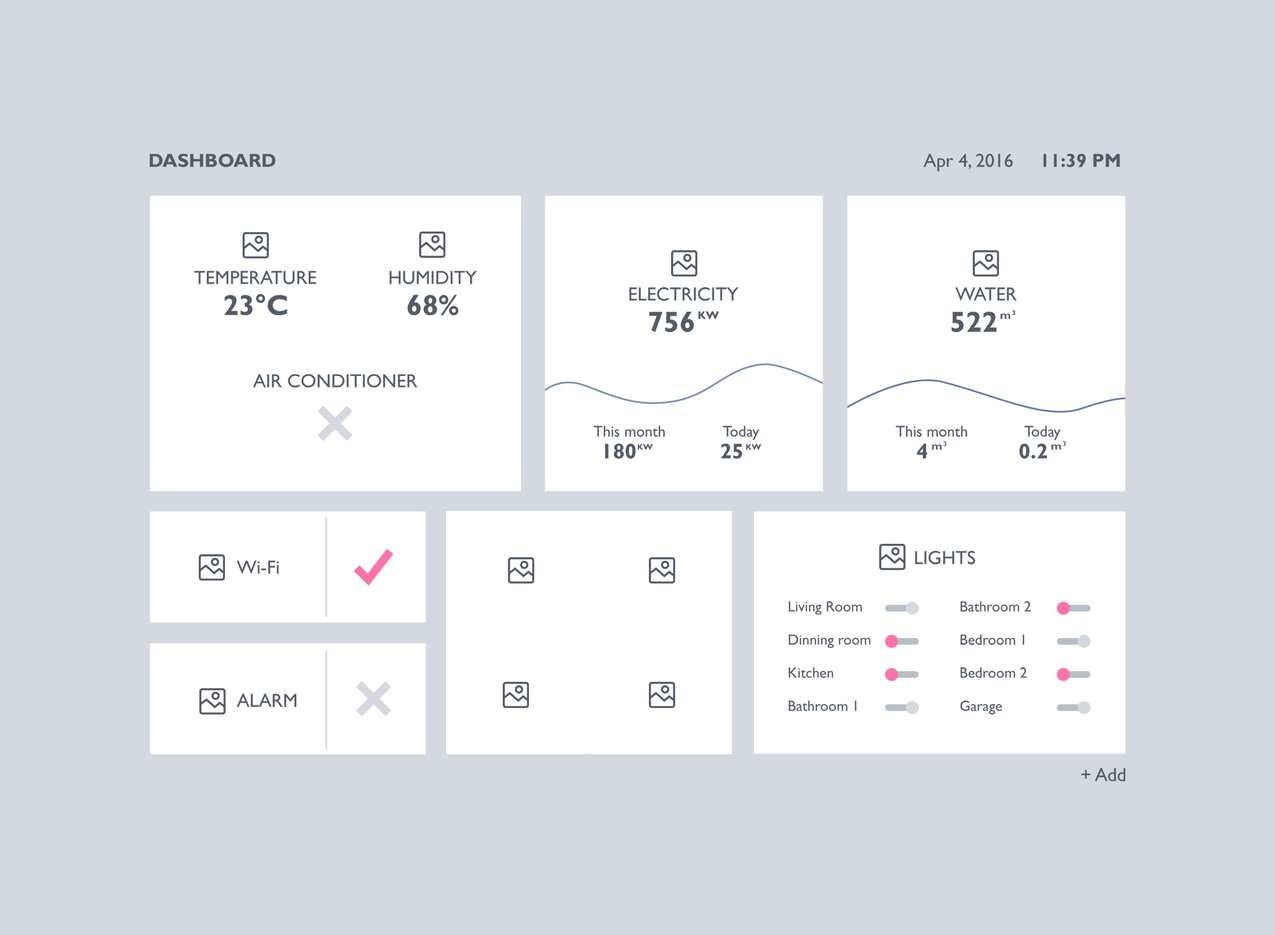
<style>
.page{position:relative;width:1275px;height:935px;background:#d3d9de}
.page>*{position:absolute;margin:0}
.t1{font:19px "GillSansMT-Bold";color:#525c66;text-transform:uppercase}
.t2{font:19px "GillSansMT";color:#525c66}
.t3{font:19px "GillSansMT-Bold";color:#525c66}
.t4{font:19px "GillSansMT";color:#525c66;text-transform:uppercase}
.t5{font:29px "GillSansMT-Bold";color:#525c66;text-transform:uppercase}
.t6{font:11px "GillSansMT-Bold";color:#525c66;text-transform:uppercase}
.t7{font:11px "GillSansMT-Bold";color:#525c66}
.t8{font:6.5px "GillSansMT-Bold";color:#525c66;text-transform:uppercase;scale:1.05 1}
.t9{font:15.6px "GillSansMT";color:#525c66}
.t10{font:21.2px "GillSansMT-Bold";color:#525c66;text-transform:uppercase}
.t11{font:8.2px "GillSansMT-Bold";color:#525c66;text-transform:uppercase}
.t12{font:14.7px "GillSansMT";color:#525c66}
</style>
<div class="page">
<p class="t1" style="left:150px;top:154px;width:125px;height:13px">dashboard</p>
<p class="t2" style="left:923px;top:154px;width:197px;height:17px">Apr 4, 2016     <span class="t3">11:39 PM</span></p>
<p class="t4" style="left:194px;top:271px;width:122px;height:14px">Temperature</p>
<p class="t4" style="left:389px;top:271px;width:88px;height:14px">Humidity</p>
<p class="t4" style="left:629px;top:287px;width:110px;height:14px">electricity</p>
<p class="t4" style="left:955px;top:287px;width:62px;height:14px">water</p>
<p class="t5" style="left:225px;top:294px;width:63px;height:21px">23°C</p>
<p class="t5" style="left:408px;top:295px;width:50px;height:20px">68%</p>
<p class="t5" style="left:649px;top:312px;width:45px;height:20px">756</p>
<p class="t6" style="left:698px;top:311px;width:21px;height:8px">kW</p>
<p class="t5" style="left:951px;top:312px;width:46px;height:20px">522</p>
<p class="t7" style="left:1000px;top:313px;width:10px;height:6px">m</p>
<p class="t8" style="left:1012px;top:310px;width:4px;height:5px">3</p>
<p class="t4" style="left:253px;top:374px;width:165px;height:14px">air conditioner</p>
<p class="t9" style="left:594px;top:426px;width:71px;height:11px">This month</p>
<p class="t9" style="left:723px;top:426px;width:37px;height:14px">Today</p>
<p class="t9" style="left:896px;top:426px;width:72px;height:11px">This month</p>
<p class="t9" style="left:1024px;top:426px;width:37px;height:14px">Today</p>
<p class="t10" style="left:605px;top:443px;width:31px;height:16px">180</p>
<p class="t11" style="left:638px;top:444px;width:15px;height:6px">kW</p>
<p class="t10" style="left:721px;top:443px;width:22px;height:16px">25</p>
<p class="t11" style="left:746px;top:444px;width:15px;height:6px">kW</p>
<p class="t10" style="left:917px;top:443px;width:10px;height:15px">4</p>
<p class="t7" style="left:932px;top:444px;width:10px;height:6px">m</p>
<p class="t8" style="left:943px;top:441px;width:4px;height:5px">3</p>
<p class="t10" style="left:1020px;top:443px;width:27px;height:16px">0.2</p>
<p class="t7" style="left:1051px;top:444px;width:10px;height:6px">m</p>
<p class="t8" style="left:1063px;top:441px;width:3px;height:5px">3</p>
<p class="t4" style="left:915px;top:551px;width:61px;height:14px">lights</p>
<p class="t2" style="left:237px;top:560px;width:42px;height:14px">Wi-Fi</p>
<p class="t12" style="left:789px;top:601px;width:73px;height:14px">Living Room</p>
<p class="t12" style="left:961px;top:601px;width:70px;height:11px">Bathroom 2</p>
<p class="t12" style="left:789px;top:634px;width:82px;height:14px">Dinning room</p>
<p class="t12" style="left:961px;top:634px;width:63px;height:11px">Bedroom 1</p>
<p class="t12" style="left:789px;top:667px;width:44px;height:11px">Kitchen</p>
<p class="t12" style="left:961px;top:667px;width:66px;height:11px">Bedroom 2</p>
<p class="t4" style="left:237px;top:694px;width:59px;height:13px">Alarm</p>
<p class="t12" style="left:789px;top:701px;width:68px;height:10px">Bathroom 1</p>
<p class="t12" style="left:961px;top:701px;width:41px;height:14px">Garage</p>
<p class="t2" style="left:1081px;top:768px;width:45px;height:13px">+ Add</p>
</div>
